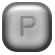
<style>
.page{position:relative;width:55px;height:55px;background:#ffffff}
.page>*{position:absolute;margin:0}
.t1{font:28px "ArialMT";color:#939393}
</style>
<div class="page">
<p class="t1" style="left:21px;top:17px;width:16px;height:20px">P</p>
</div>
